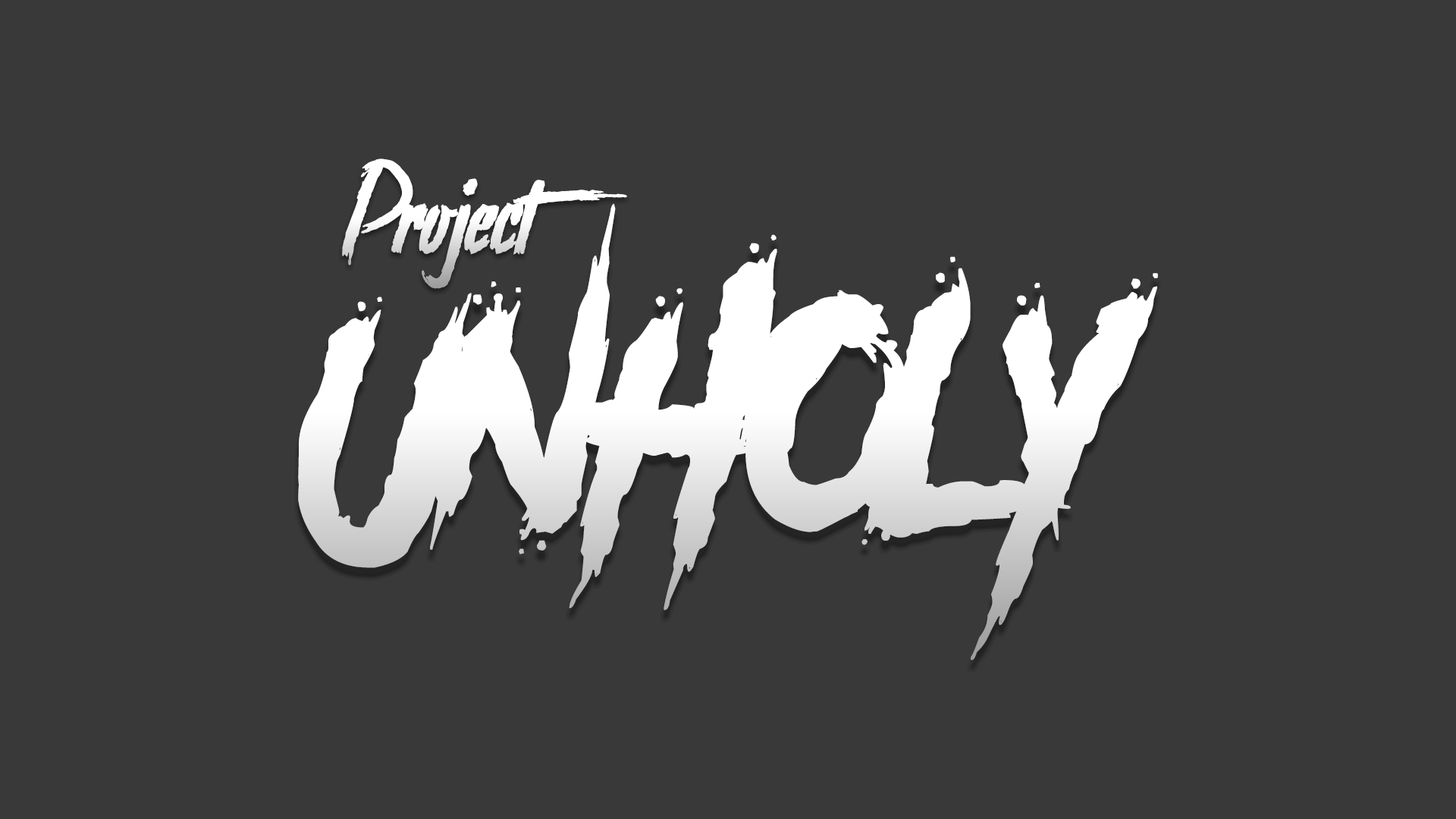
<style>
.page{position:relative;width:1456px;height:819px;background:#393939}
.page>*{position:absolute;margin:0}
.t1{font:180.1px "Stranger-back-in-the-Night";letter-spacing:-0.025em;color:#ffffff}
.t2{font:279.8px "AnotherDangerDemo";letter-spacing:-0.025em;color:#ffffff}
</style>
<div class="page">
<p class="t1" style="left:342px;top:158px;width:285px;height:131px">Project</p>
<p class="t2" style="left:298px;top:203px;width:860px;height:457px">UNHOLY</p>
</div>
